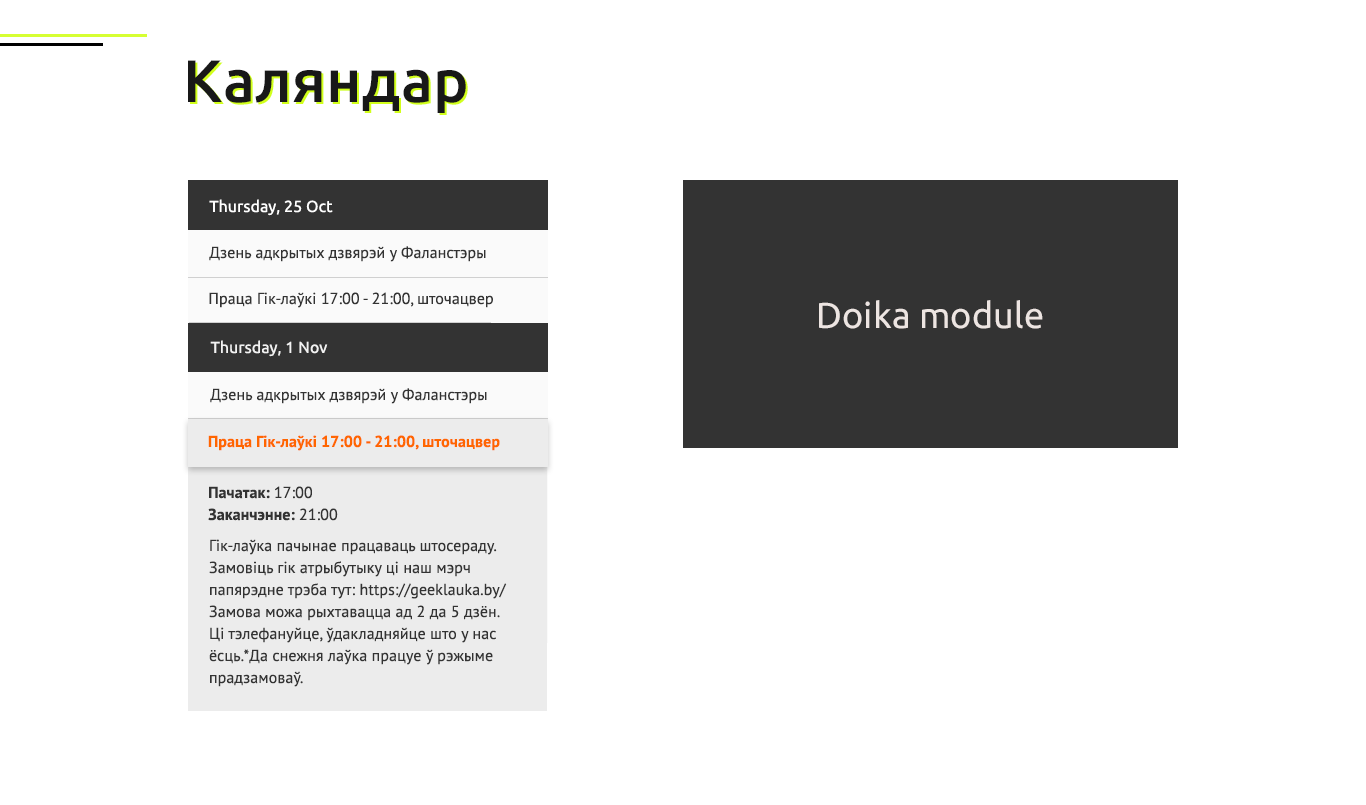
<style>
.page{position:relative;width:1366px;height:805px;background:#ffffff}
.page>*{position:absolute;margin:0}
.t1{font:60px "Ubuntu-Medium";letter-spacing:0.005em;color:#181818}
.t2{font:60px "Ubuntu-Medium";letter-spacing:0.005em}
.t3{font:16px "Ubuntu-Regular";letter-spacing:0.005em;color:#ffffff}
.t4{font:16px "PTSans-Regular";letter-spacing:0.005em;color:#333333}
.t5{font:36px "Ubuntu-Regular";letter-spacing:0.005em;color:#ede5e2}
.t6{font:16px "Ubuntu-Regular";letter-spacing:0.005em;color:#f2f2f2}
.t7{font:16px "PTSans-Bold";letter-spacing:0.005em;color:#ff6600}
.t8{font:16px/22px "PTSans-Bold";letter-spacing:0.005em;color:#333333}
.t9{font:16px/22px "PTSans-Regular";letter-spacing:0.005em;color:#333333}
</style>
<div class="page">
<p class="t1" style="left:188px;top:60px;width:278px;height:53px">Каляндар</p>
<p class="t2" style="left:190px;top:62px;width:278px;height:53px">Каляндар</p>
<p class="t3" style="left:209px;top:199px;width:124px;height:17px">Thursday, 25 Oct</p>
<p class="t4" style="left:209px;top:246px;width:277px;height:16px">Дзень адкрытых дзвярэй у Фаланстэры</p>
<p class="t4" style="left:209px;top:292px;width:284px;height:16px">Праца Гік-лаўкі 17:00 - 21:00, шточацвер</p>
<p class="t5" style="left:819px;top:300px;width:224px;height:29px">Doika module</p>
<p class="t6" style="left:210px;top:340px;width:118px;height:17px">Thursday, 1 Nov</p>
<p class="t4" style="left:210px;top:388px;width:277px;height:16px">Дзень адкрытых дзвярэй у Фаланстэры</p>
<p class="t7" style="left:208px;top:435px;width:292px;height:16px">Праца Гік-лаўкі 17:00 - 21:00, шточацвер</p>
<p class="t8" style="left:208px;top:486px;width:130px;height:35px">Пачатак: <span class="t9">17:00<br></span>Заканчэнне: <span class="t9">21:00</span></p>
<p class="t9" style="left:209px;top:539px;width:298px;height:148px">Гік-лаўка пачынае працаваць штосераду.<br>Замовіць гік атрыбутыку ці наш мэрч <br>папярэдне трэба тут: https://geeklauka.by/<br>Замова можа рыхтавацца ад 2 да 5 дзён. <br>Ці тэлефануйце, ўдакладняйце што у нас <br>ёсць.*Да снежня лаўка працуе ў рэжыме <br>прадзамоваў.</p>
</div>
